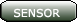
<style>
.page{position:relative;width:77px;height:22px}
.page>*{position:absolute;margin:0}
.t1{font:11px "Verdana";color:#ffffff}
</style>
<div class="page">
<p class="t1" style="left:14px;top:8px;width:46px;height:10px">SENSOR</p>
</div>
